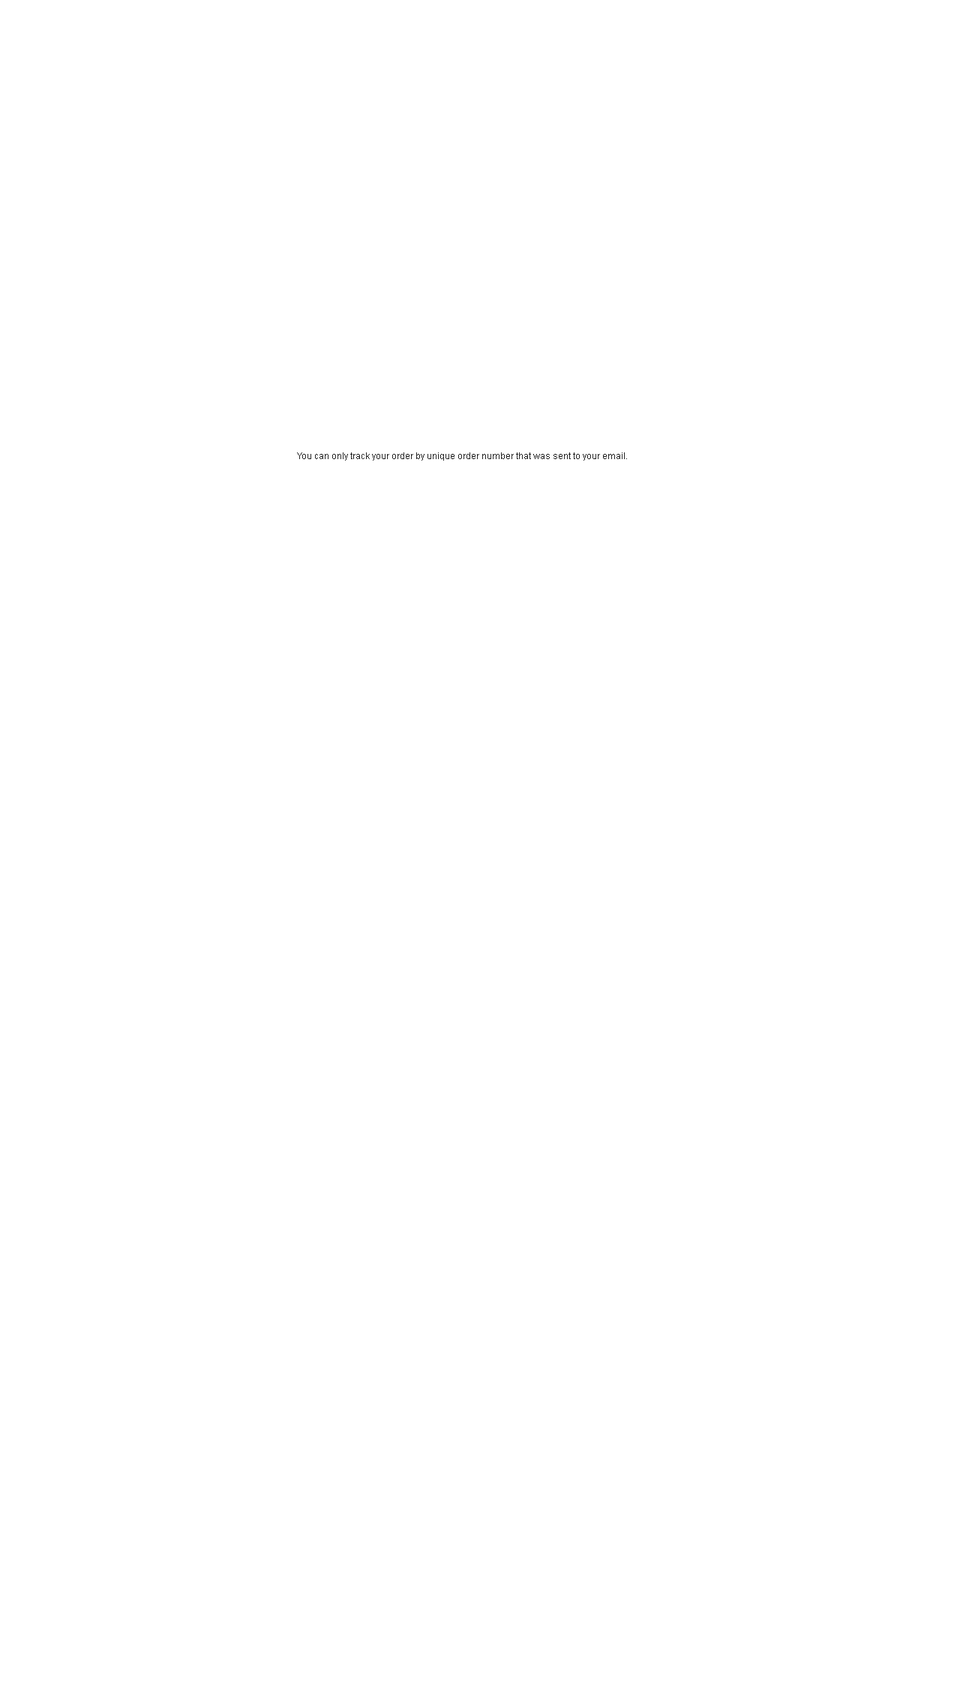
<style>
.page{position:relative;width:960px;height:1688px;background:#ffffff}
.page>*{position:absolute;margin:0}
.t1{font:9px "ArialMT";color:#232323}
</style>
<div class="page">
<p class="t1" style="left:297px;top:452px;width:330px;height:8px">You can only track your order by unique order number that was sent to your email.</p>
</div>
